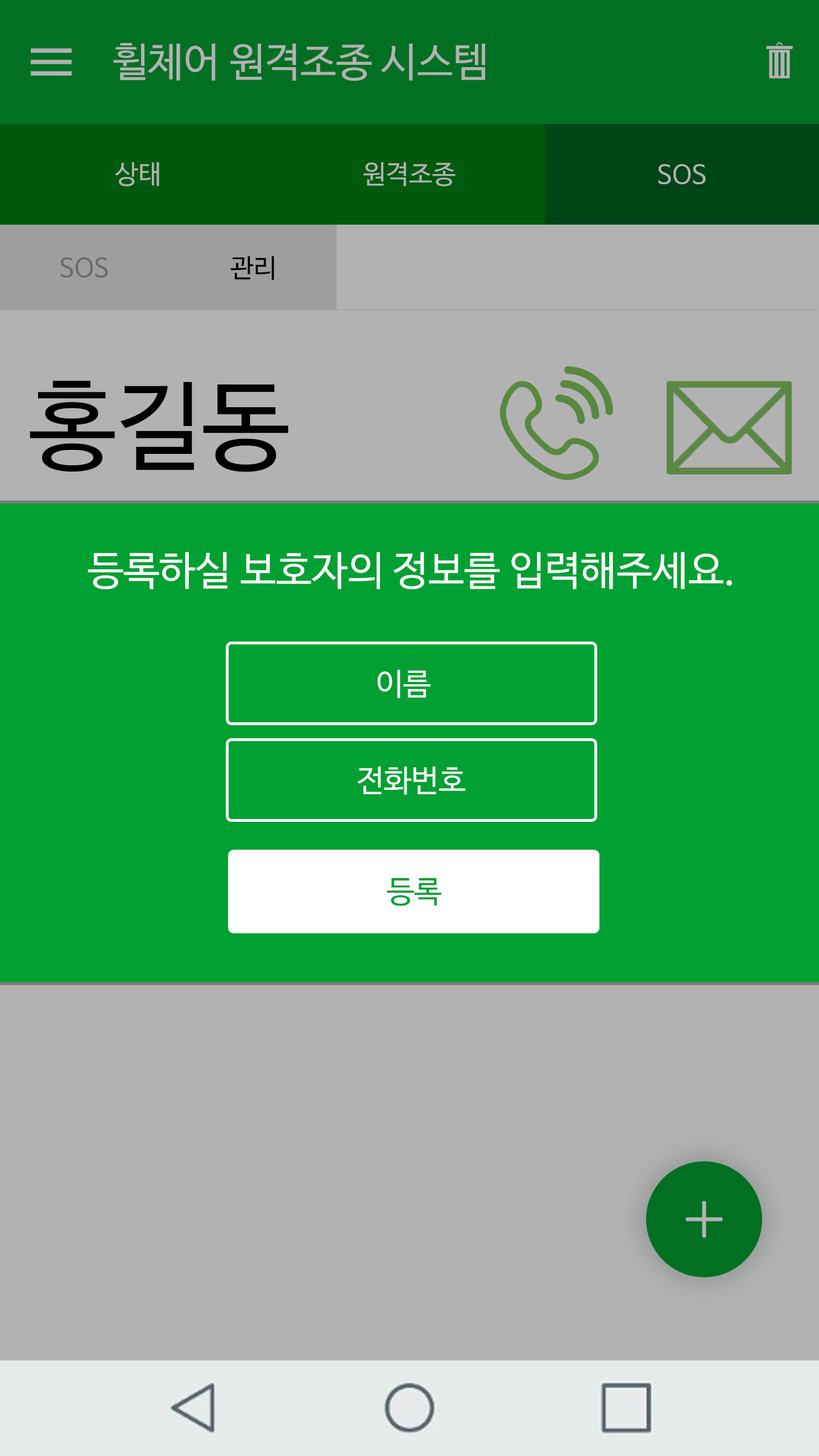
<style>
.page{position:relative;width:819px;height:1456px;background:#b2b2b2}
.page>*{position:absolute;margin:0}
.t1{font:40.3px "NanumBarunGothicOTF";color:#b2b2b2}
.t2{font:26.1px "NanumBarunGothicOTF";color:#b2b2b2}
.t3{font:26.1px "NanumBarunGothicOTF";color:#6b6b6b}
.t4{font:26.1px "NanumBarunGothicOTF";color:#000000}
.t5{font:97.2px "NanumBarunGothicOTF";color:#000000}
.t6{font:40.3px "NanumBarunGothicOTF";color:#ffffff}
.t7{font:30.8px "NanumBarunGothicOTF";color:#ffffff}
.t8{font:30.8px "NanumBarunGothicOTF";color:#01a032}
</style>
<div class="page">
<p class="t1" style="left:113px;top:43px;width:372px;height:38px">휠체어 원격조종 시스템</p>
<p class="t2" style="left:115px;top:162px;width:44px;height:25px">상태</p>
<p class="t2" style="left:363px;top:162px;width:93px;height:25px">원격조종</p>
<p class="t2" style="left:658px;top:164px;width:48px;height:20px">SOS</p>
<p class="t3" style="left:60px;top:257px;width:48px;height:21px">SOS</p>
<p class="t4" style="left:230px;top:256px;width:44px;height:24px">관리</p>
<p class="t5" style="left:30px;top:380px;width:258px;height:92px">홍길동</p>
<p class="t6" style="left:88px;top:552px;width:644px;height:37px">등록하실 보호자의 정보를 입력해주세요.</p>
<p class="t7" style="left:377px;top:669px;width:54px;height:29px">이름</p>
<p class="t7" style="left:357px;top:766px;width:109px;height:29px">전화번호</p>
<p class="t8" style="left:387px;top:878px;width:54px;height:28px">등록</p>
</div>
